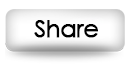
<style>
.page{position:relative;width:128px;height:64px;background:#ffffff}
.page>*{position:absolute;margin:0}
.t1{font:24px "CenturyGothic";letter-spacing:-0.04em;color:#000000;font-weight:bold}
</style>
<div class="page">
<p class="t1" style="left:34px;top:20px;width:64px;height:18px">Share</p>
</div>
